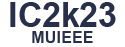
<style>
.page{position:relative;width:125px;height:47px;background:#ffffff}
.page>*{position:absolute;margin:0}
.t1{font:33.6px "Arial-BoldMT";color:#282f4b}
.t2{font:16.3px "Arial-BoldMT";color:#282f4b}
</style>
<div class="page">
<p class="t1" style="left:10px;top:2px;width:106px;height:25px">IC2k23</p>
<p class="t2" style="left:32px;top:31px;width:61px;height:12px">MUIEEE</p>
</div>
